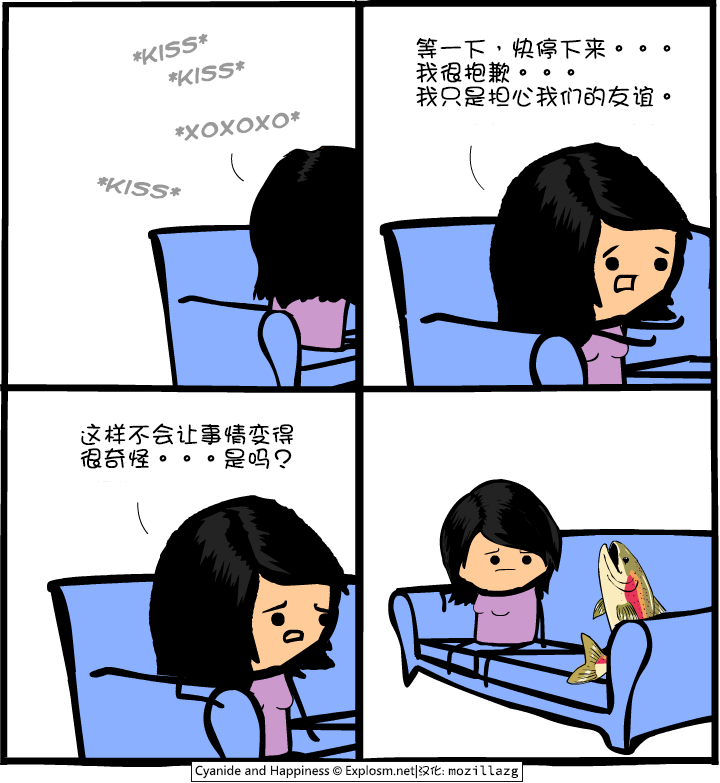
<style>
.page{position:relative;width:720px;height:783px;background:#ffffff}
.page>*{position:absolute;margin:0}
.t1{font:24px/24px "DFGirl";color:#000000}
</style>
<div class="page">
<p class="t1" style="left:416px;top:37px;width:255px;height:70px">等一下，快停下来。。。<br>我很抱歉。。。<br>我只是担心我们的友谊。</p>
<p class="t1" style="left:80px;top:423px;width:214px;height:46px">这样不会让事情变得<br>很奇怪。。。是吗？</p>
</div>
